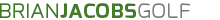
<style>
.page{position:relative;width:220px;height:20px;background:#ffffff}
.page>*{position:absolute;margin:0}
.t1{font:25px "Exo-DemiBold";color:#45812b;font-variant:small-caps}
.t2{font:25px "Exo-Light";color:#45812b;font-variant:small-caps}
.t3{font:25px "Exo-Light";color:#888888;font-variant:small-caps}
</style>
<div class="page">
<p class="t1" style="left:0px;top:3px;width:191px;height:15px"><span class="t2">brian</span>jacobs<span class="t3">golf</span></p>
</div>
